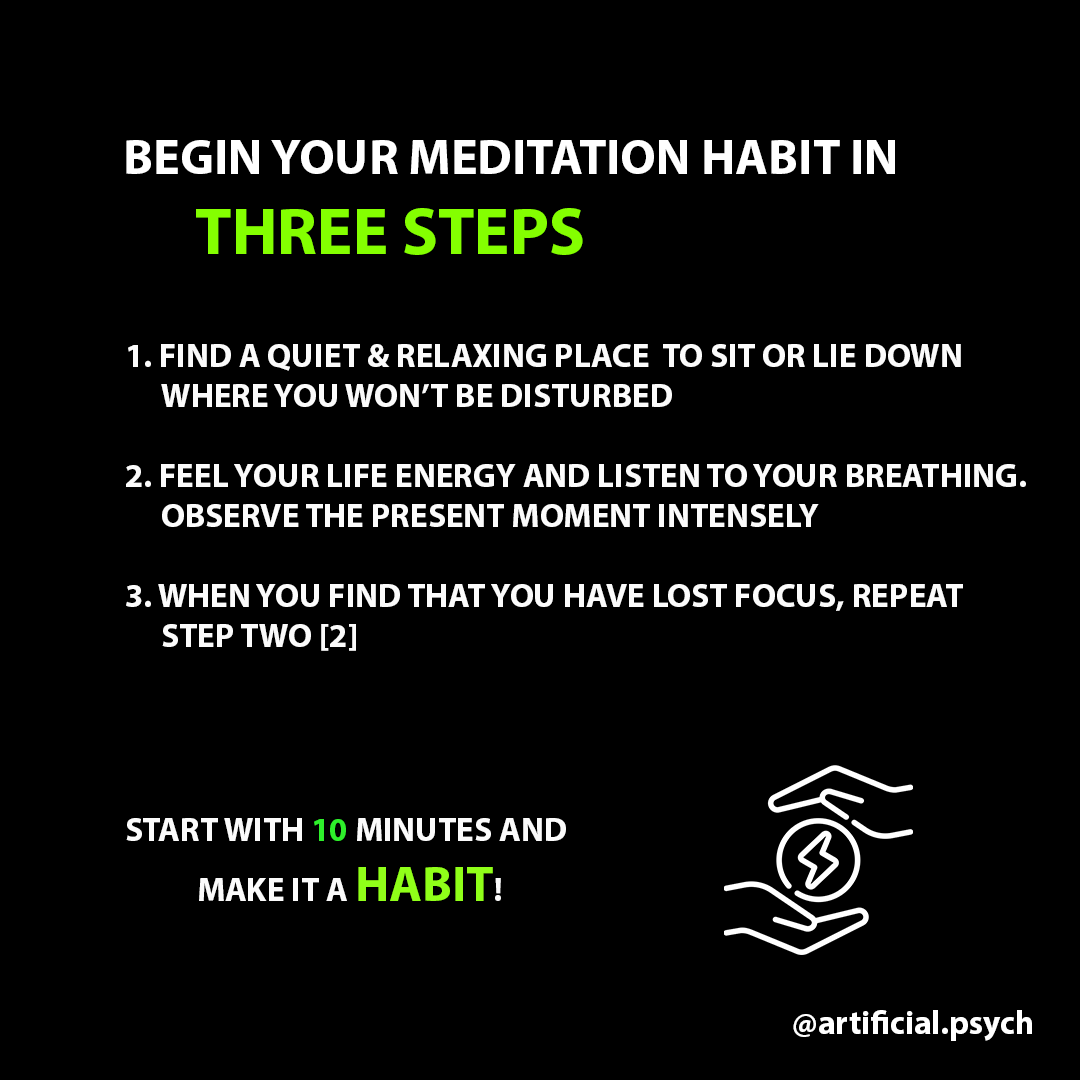
<style>
.page{position:relative;width:1080px;height:1080px;background:#000000}
.page>*{position:absolute;margin:0}
.t1{font:50px "MyriadPro-Bold";color:#ffffff}
.t2{font:66.7px "MyriadPro-Bold";color:#84ff00}
.t3{font:33.3px "MyriadPro-Bold";color:#fbfbfb}
.t4{font:33.3px "MyriadPro-Bold";color:#2eef2b}
.t5{font:50px "MyriadPro-Bold";color:#90ff19}
.t6{font:33.3px "MyriadPro-Bold";color:#ffffff}
</style>
<div class="page">
<p class="t1" style="left:126px;top:140px;width:769px;height:115px">BEGIN YOUR MEDITATION HABIT IN <br><span class="t2">  THREE STEPS</span></p>
<p class="t3" style="left:126px;top:344px;width:900px;height:307px">1. FIND A QUIET &amp; RELAXING PLACE  TO SIT OR LIE DOWN <br> WHERE YOU WON’T BE DISTURBED<br><br>2. FEEL YOUR LIFE ENERGY AND LISTEN TO YOUR BREATHING. <br> OBSERVE THE PRESENT MOMENT INTENSELY<br><br>3. WHEN YOU FIND THAT YOU HAVE LOST FOCUS, REPEAT <br> STEP TWO [2]</p>
<p class="t3" style="left:126px;top:818px;width:440px;height:83px">START WITH <span class="t4">10 </span>MINUTES AND <br>  MAKE IT A <span class="t5">HABIT</span>!</p>
<p class="t6" style="left:793px;top:1010px;width:239px;height:31px">@artificial.psych</p>
</div>
